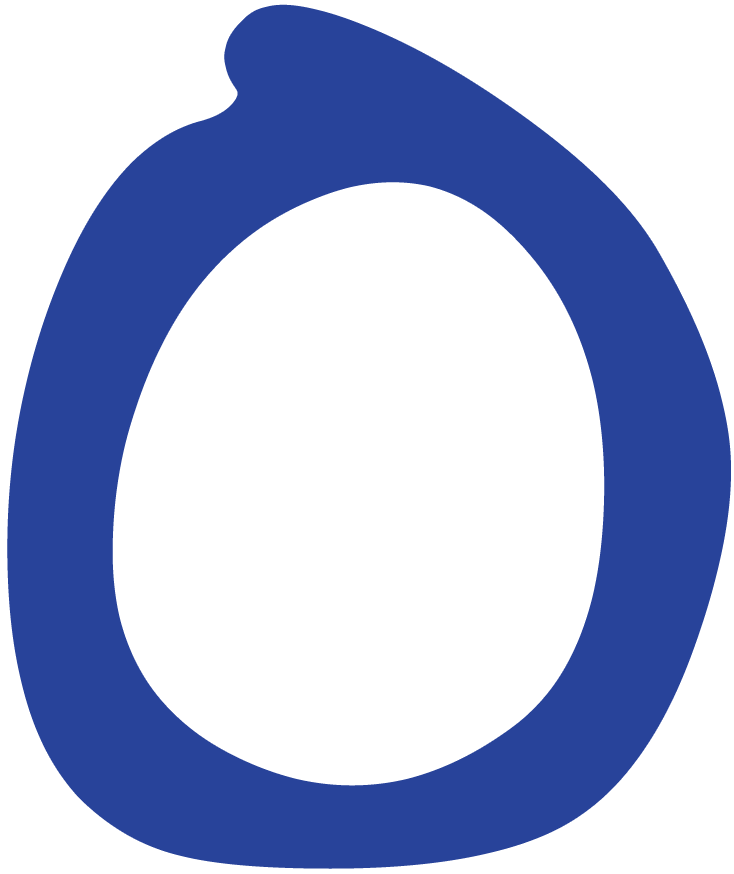
<style>
.page{position:relative;width:734px;height:874px;background:#ffffff}
.page>*{position:absolute;margin:0}
.t1{font:2067.3px "CARO";letter-spacing:0.02em;color:#28439a;scale:1.34 1}
</style>
<div class="page">
<p class="t1" style="left:17px;top:14px;width:704px;height:845px">O</p>
</div>
